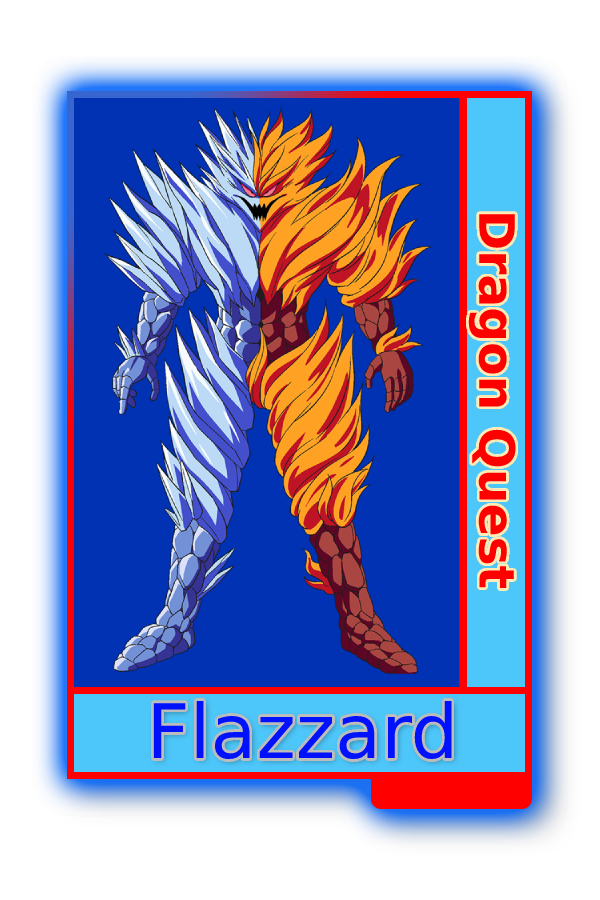
<style>
.page{position:relative;width:600px;height:900px;background:#0032b3}
.page>*{position:absolute;margin:0}
.t1{font:48.8px "MADETOMMY-Bold";color:#ff0000}
.t2{font:75px "CoolveticaRg-Regular";color:#0011fd}
</style>
<div class="page">
<p class="t1" style="left:468px;top:214px;width:48px;height:374px;rotate:90deg">Dragon Quest</p>
<p class="t2" style="left:153px;top:701px;width:299px;height:59px">Flazzard</p>
</div>
